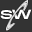
<style>
.page{position:relative;width:32px;height:32px;background:#333333}
.page>*{position:absolute;margin:0}
.t1{font:13.2px "MonumentExtended-Regular";color:#ffffff}
</style>
<div class="page">
<p class="t1" style="left:0px;top:9px;width:32px;height:10px">SW</p>
</div>
